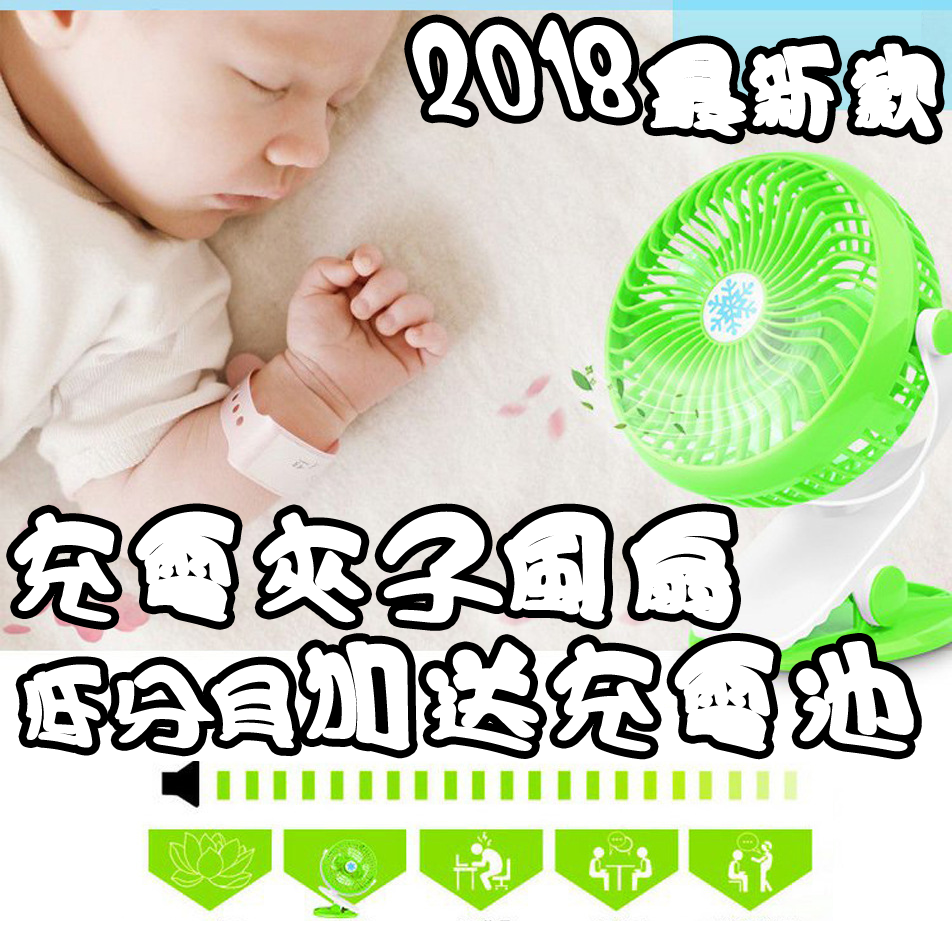
<style>
.page{position:relative;width:952px;height:935px;background:#ffffff}
.page>*{position:absolute;margin:0}
.t1{font:100px "HanWangCC02";letter-spacing:-0.01em;color:#ffffff;font-weight:bold}
.t2{font:120px "HanWangCC02";letter-spacing:-0.01em;color:#ffffff;font-weight:bold}
.t3{font:90px "HanWangCC02";letter-spacing:-0.01em;color:#ffffff;font-weight:bold}
</style>
<div class="page">
<p class="t1" style="left:412px;top:20px;width:525px;height:117px">2018最新款</p>
<p class="t2" style="left:14px;top:511px;width:719px;height:112px">充電夾子風扇</p>
<p class="t2" style="left:23px;top:641px;width:891px;height:111px"><span class="t3">低分貝</span>加送充電池</p>
</div>
